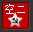
<style>
.page{position:relative;width:33px;height:32px;background:#c50000}
.page>*{position:absolute;margin:0}
.t1{font:10.8px "SimSun";color:#ffffff}
</style>
<div class="page">
<p class="t1" style="left:5px;top:4px;width:20px;height:10px">空二</p>
</div>
